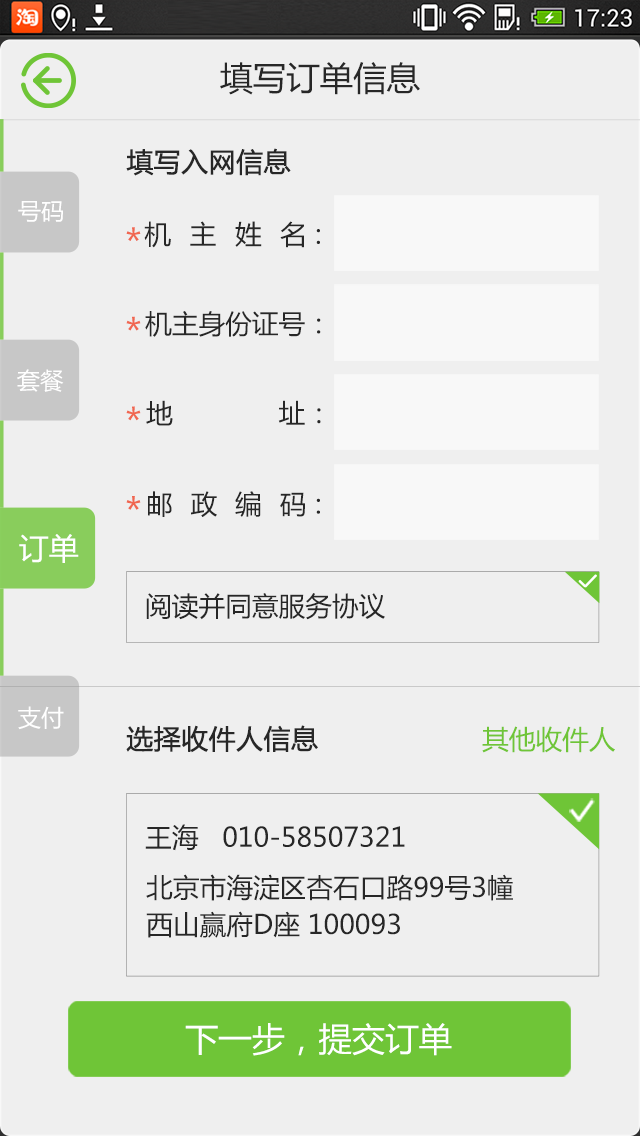
<style>
.page{position:relative;width:640px;height:1136px;background:#efefef}
.page>*{position:absolute;margin:0}
.t1{font:33.3px "MicrosoftYaHei";color:#272727}
.t2{font:26.7px "MicrosoftYaHei";color:#272727;font-weight:bold}
.t3{font:23.3px "MicrosoftYaHei";color:#ffffff}
.t4{font:26.7px "MicrosoftYaHei";letter-spacing:0.7em;color:#272727}
.t5{font:37px "MicrosoftYaHei";color:#f06751}
.t6{font:26.7px "MicrosoftYaHei";color:#272727}
.t7{font:26.7px "MicrosoftYaHei";letter-spacing:0.67em;color:#272727}
.t8{font:30px "MicrosoftYaHei";color:#ffffff}
.t9{font:26.7px "MicrosoftYaHei";color:#6fc537}
.t10{font:26.7px/37px "MicrosoftYaHei";color:#272727}
.t11{font:33.3px "MicrosoftYaHei";color:#ffffff}
</style>
<div class="page">
<p class="t1" style="left:220px;top:62px;width:200px;height:33px">填写订单信息</p>
<p class="t2" style="left:126px;top:148px;width:165px;height:28px">填写入网信息</p>
<p class="t3" style="left:18px;top:201px;width:45px;height:21px">号码</p>
<p class="t4" style="left:144px;top:221px;width:176px;height:27px">机主姓名：</p>
<p class="t5" style="left:126px;top:227px;width:15px;height:14px">*</p>
<p class="t5" style="left:126px;top:316px;width:15px;height:15px">*</p>
<p class="t6" style="left:145px;top:311px;width:176px;height:26px">机主身份证号：</p>
<p class="t3" style="left:17px;top:369px;width:47px;height:23px">套餐</p>
<p class="t4" style="left:146px;top:400px;width:175px;height:26px">地址：</p>
<p class="t5" style="left:126px;top:406px;width:15px;height:15px">*</p>
<p class="t5" style="left:126px;top:496px;width:15px;height:14px">*</p>
<p class="t7" style="left:148px;top:491px;width:172px;height:26px">邮政编码：</p>
<p class="t8" style="left:19px;top:534px;width:60px;height:29px">订单</p>
<p class="t6" style="left:146px;top:593px;width:239px;height:27px">阅读并同意服务协议</p>
<p class="t3" style="left:18px;top:706px;width:46px;height:24px">支付</p>
<p class="t2" style="left:126px;top:725px;width:192px;height:28px">选择收件人信息</p>
<p class="t9" style="left:482px;top:726px;width:133px;height:27px">其他收件人</p>
<p class="t6" style="left:145px;top:824px;width:260px;height:27px">王海   010-58507321</p>
<p class="t10" style="left:146px;top:874px;width:367px;height:64px">北京市海淀区杏石口路99号3幢<br>西山赢府D座 100093</p>
<p class="t11" style="left:185px;top:1023px;width:267px;height:33px">下一步，提交订单</p>
</div>
